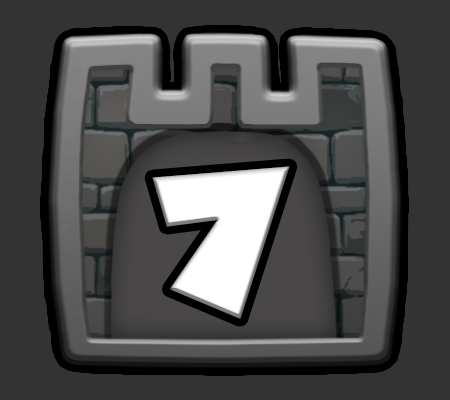
<style>
.page{position:relative;width:450px;height:400px;background:#333333}
.page>*{position:absolute;margin:0}
.t1{font:217px "Funhouse";color:#ffffff}
</style>
<div class="page">
<p class="t1" style="left:152px;top:166px;width:138px;height:153px">7</p>
</div>
